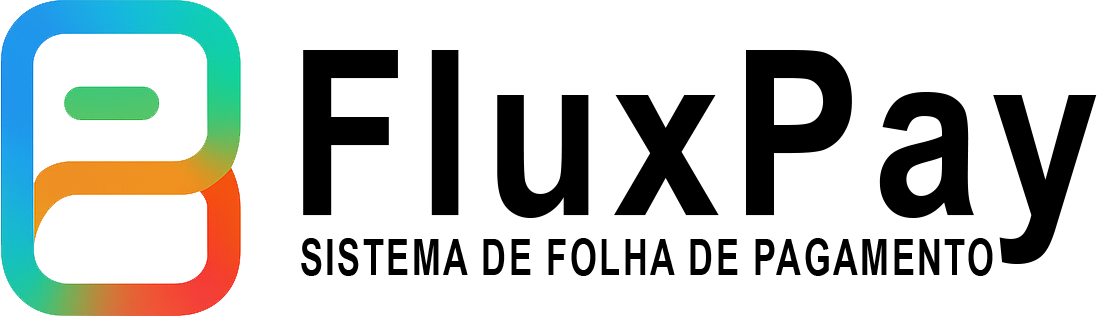
<style>
.page{position:relative;width:1097px;height:316px;background:#ffffff}
.page>*{position:absolute;margin:0}
.t1{font:230px "Arial-BoldMT";letter-spacing:0.06em;color:#000000;scale:0.84 1}
.t2{font:50px "ArialNarrow-Bold";letter-spacing:0.06em;color:#000000;scale:0.84 1}
</style>
<div class="page">
<p class="t1" style="left:303px;top:50px;width:794px;height:214px">FluxPay</p>
<p class="t2" style="left:301px;top:238px;width:692px;height:38px">SISTEMA DE FOLHA DE PAGAMENTO</p>
</div>
